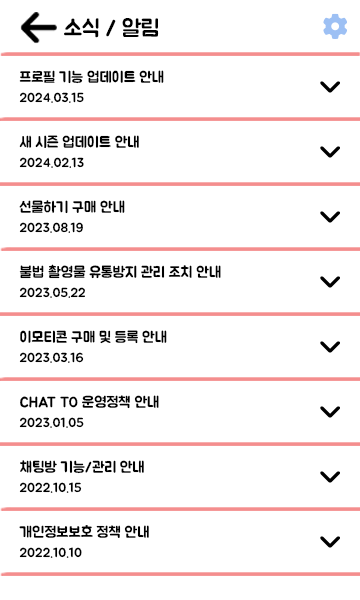
<style>
.page{position:relative;width:360px;height:600px;background:#ffffff}
.page>*{position:absolute;margin:0}
.t1{font:23px "BMJUA";color:#000000}
.t2{font:15px "BMJUA";color:#000000}
.t3{font:13px "BMJUA";color:#000000}
</style>
<div class="page">
<p class="t1" style="left:64px;top:18px;width:95px;height:20px">소식 / 알림</p>
<p class="t2" style="left:19px;top:70px;width:145px;height:14px">프로필 기능 업데이트 안내</p>
<p class="t3" style="left:19px;top:92px;width:65px;height:11px">2024.03.15</p>
<p class="t2" style="left:19px;top:135px;width:120px;height:13px">새 시즌 업데이트 안내</p>
<p class="t3" style="left:19px;top:157px;width:65px;height:11px">2024.02.13</p>
<p class="t2" style="left:19px;top:200px;width:106px;height:14px">선물하기 구매 안내</p>
<p class="t3" style="left:19px;top:222px;width:64px;height:11px">2023.08.19</p>
<p class="t2" style="left:19px;top:264px;width:202px;height:15px">불법 촬영물 유통방지 관리 조치 안내</p>
<p class="t3" style="left:19px;top:287px;width:66px;height:11px">2023.05.22</p>
<p class="t2" style="left:20px;top:330px;width:147px;height:14px">이모티콘 구매 및 등록 안내</p>
<p class="t3" style="left:19px;top:352px;width:65px;height:11px">2023.03.16</p>
<p class="t2" style="left:20px;top:395px;width:139px;height:14px">CHAT TO 운영정책 안내</p>
<p class="t3" style="left:19px;top:417px;width:65px;height:11px">2023.01.05</p>
<p class="t2" style="left:20px;top:460px;width:124px;height:14px">채팅방 기능/관리 안내</p>
<p class="t3" style="left:19px;top:482px;width:63px;height:11px">2022.10.15</p>
<p class="t2" style="left:19px;top:525px;width:130px;height:13px">개인정보보호 정책 안내</p>
<p class="t3" style="left:19px;top:547px;width:63px;height:11px">2022.10.10</p>
</div>
